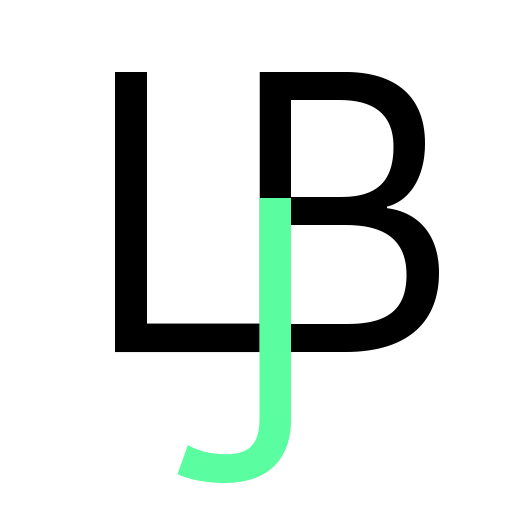
<style>
.page{position:relative;width:532px;height:515px;background:#ffffff}
.page>*{position:absolute;margin:0}
.t1{font:400px "KohinoorDevanagari-Book";color:#000000}
.t2{font:400px "KohinoorDevanagari-Book";color:#5afd9f}
</style>
<div class="page">
<p class="t1" style="left:115px;top:72px;width:153px;height:281px">L</p>
<p class="t1" style="left:259px;top:72px;width:180px;height:280px">B</p>
<p class="t2" style="left:177px;top:198px;width:114px;height:285px">J</p>
</div>
